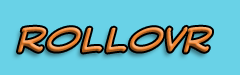
<style>
.page{position:relative;width:240px;height:75px;background:#69d2e7}
.page>*{position:absolute;margin:0}
.t1{font:37.5px "WebLettererProBB-Italic"}
</style>
<div class="page">
<p class="t1" style="left:18px;top:26px;width:194px;height:27px">ROLLOVR</p>
</div>
